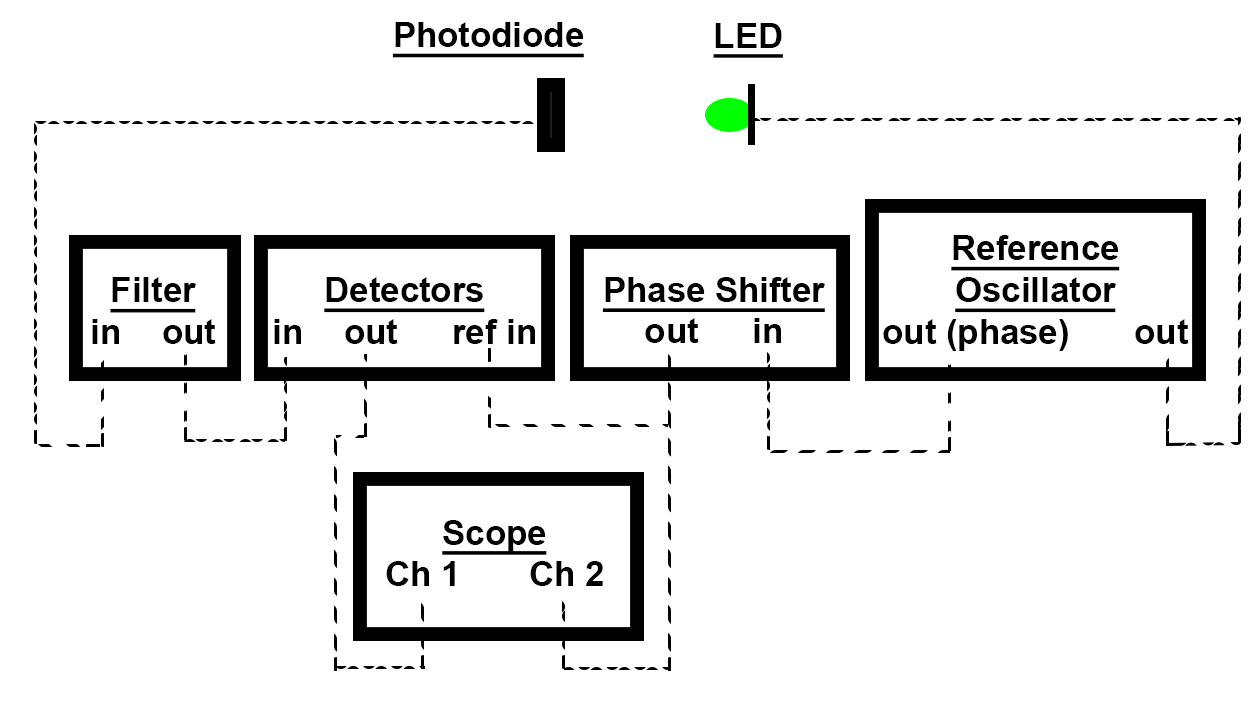
<style>
.page{position:relative;width:1250px;height:702px;background:#ffffff}
.page>*{position:absolute;margin:0}
.t1{font:34.7px "Arial-BoldMT";color:#000000;text-decoration:underline}
.t2{font:34.7px "Arial-BoldMT";color:#000000}
</style>
<div class="page">
<p class="t1" style="left:392px;top:22px;width:192px;height:36px">Photodiode</p>
<p class="t1" style="left:713px;top:23px;width:70px;height:35px">LED</p>
<p class="t1" style="left:883px;top:235px;width:306px;height:116px;text-align:center">Reference<br>Oscillator<br><span class="t2">out (phase)  out</span></p>
<p class="t2" style="left:92px;top:277px;width:124px;height:67px;text-align:center"><span class="t1">Filter<br></span>in  out</p>
<p class="t2" style="left:274px;top:277px;width:261px;height:67px;text-align:center"><span class="t1">Detectors<br></span>in  out  ref in</p>
<p class="t1" style="left:602px;top:277px;width:223px;height:66px;text-align:center">Phase Shifter<br><span class="t2">out  in</span></p>
<p class="t2" style="left:386px;top:520px;width:217px;height:66px;text-align:center"><span class="t1">Scope<br></span>Ch 1  Ch 2</p>
</div>
